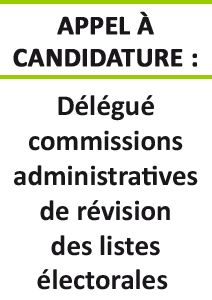
<style>
.page{position:relative;width:212px;height:300px;background:#ffffff}
.page>*{position:absolute;margin:0}
.t1{font:29px "Calibri-Bold";color:#1a171b}
.t2{font:27px "Calibri-Bold";color:#1a171b;text-transform:uppercase;font-weight:bold}
</style>
<div class="page">
<p class="t1" style="left:13px;top:11px;width:185px;height:279px;text-align:center"><span class="t2">Appel à<br>candidature :<br><br></span>Délégué<br>commissions<br>administratives<br>de révision<br>des listes<br>électorales</p>
</div>
